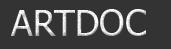
<style>
.page{position:relative;width:171px;height:49px;background:#333333}
.page>*{position:absolute;margin:0}
.t1{font:36px "Tahoma"}
</style>
<div class="page">
<p class="t1" style="left:11px;top:9px;width:135px;height:27px">ARTDOC</p>
</div>
